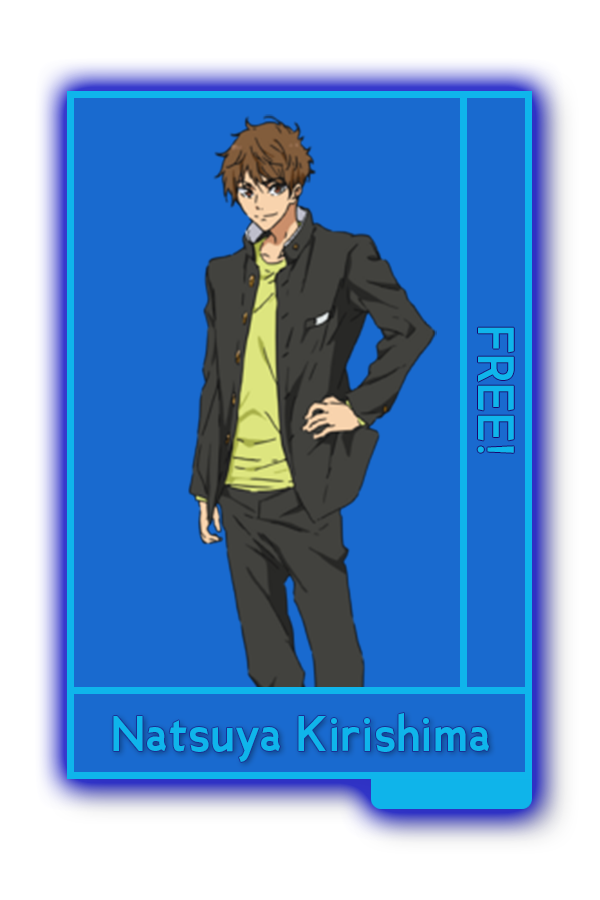
<style>
.page{position:relative;width:600px;height:900px;background:#196acf}
.page>*{position:absolute;margin:0}
.t1{font:47.8px "Ancillary-Bold";color:#0fb5eb}
.t2{font:46.7px "Ancillary-Bold";color:#0fb5eb}
</style>
<div class="page">
<p class="t1" style="left:477px;top:327px;width:37px;height:126px;rotate:90deg">FREE!</p>
<p class="t2" style="left:113px;top:713px;width:376px;height:49px">Natsuya Kirishima</p>
</div>
